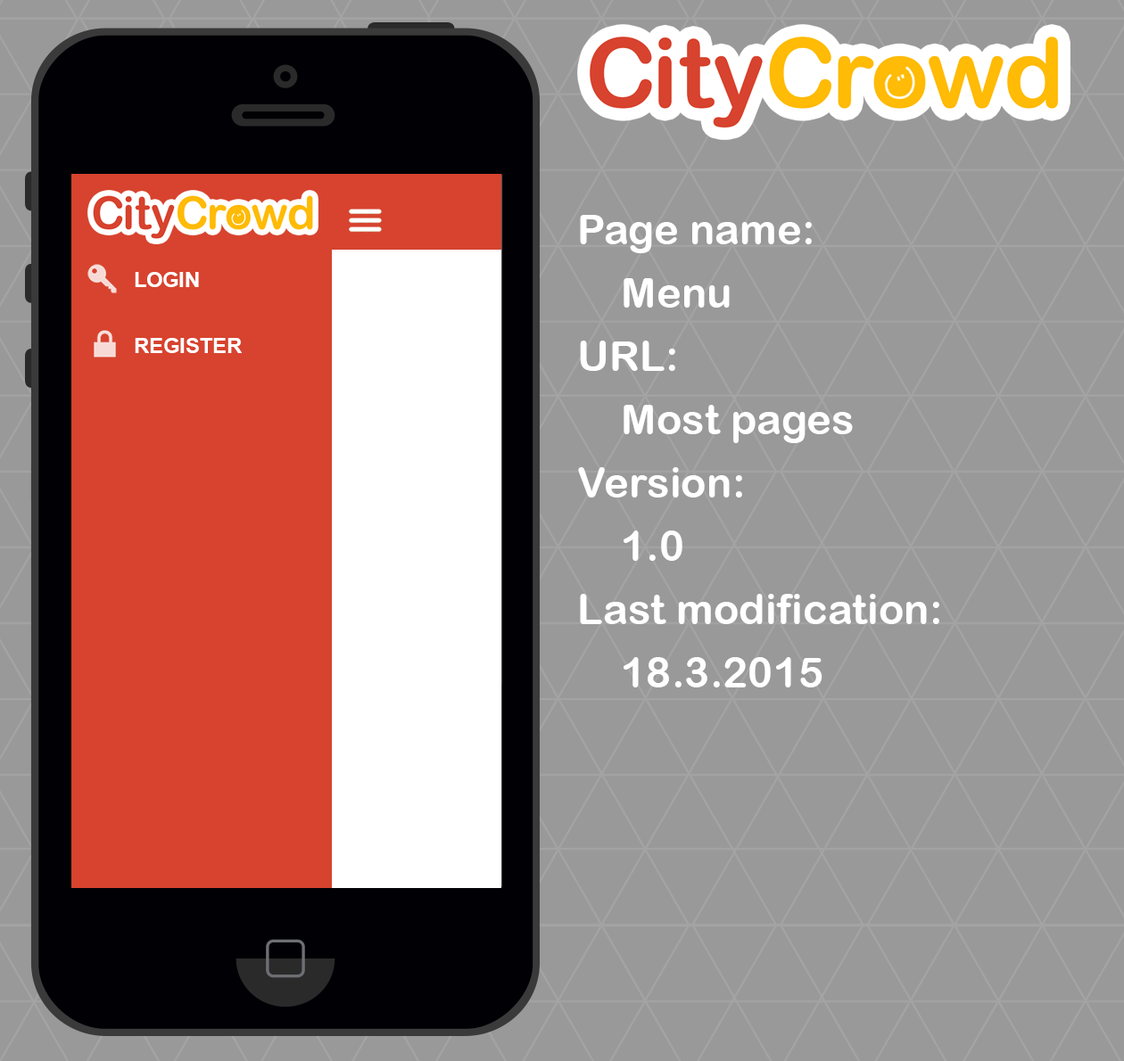
<style>
.page{position:relative;width:1124px;height:1061px;background:#999999}
.page>*{position:absolute;margin:0}
.t1{font:42.2px/63.3px "ArialRoundedMTBold";color:#ffffff}
.t2{font:21.1px/66.8px "Arial-BoldMT";color:#ffffff}
</style>
<div class="page">
<p class="t1" style="left:578px;top:215px;width:361px;height:473px">Page name:<br>Menu <br>URL:<br>Most pages<br>Version:<br>1.0<br>Last modification:<br>18.3.2015</p>
<p class="t2" style="left:135px;top:272px;width:107px;height:81px">LOGIN<br>REGISTER</p>
</div>
